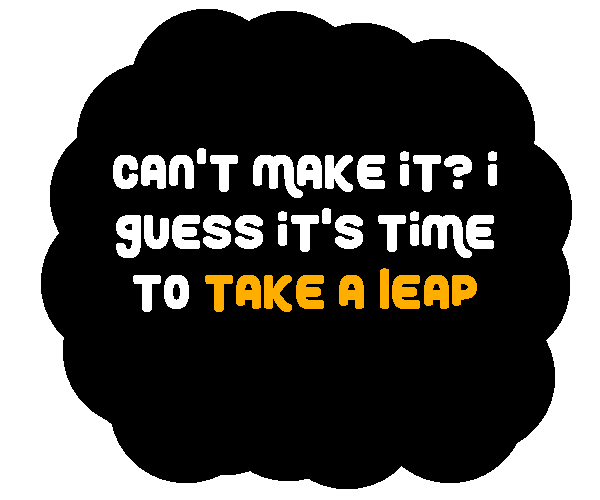
<style>
.page{position:relative;width:600px;height:500px;background:#000000}
.page>*{position:absolute;margin:0}
.t1{font:50px "RoundyRainbows";color:#ffffff}
.t2{font:50px "RoundyRainbows";color:#ffae00}
</style>
<div class="page">
<p class="t1" style="left:113px;top:148px;width:384px;height:164px;text-align:center">Can't make it? I guess it's time to <span class="t2">take a leap</span></p>
</div>
